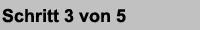
<style>
.page{position:relative;width:200px;height:30px;background:#c1c1c1}
.page>*{position:absolute;margin:0}
.t1{font:18px "Arial-BoldMT";color:#000000}
</style>
<div class="page">
<p class="t1" style="left:2px;top:8px;width:124px;height:15px">Schritt 3 von 5</p>
</div>
